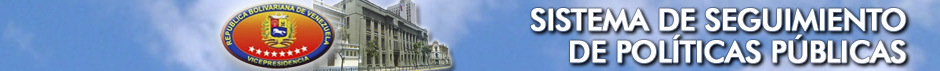
<style>
.page{position:relative;width:940px;height:71px}
.page>*{position:absolute;margin:0}
.t1{font:30px/22px "FuturaBT-Medium";letter-spacing:-0.03em;color:#ffffff;text-transform:uppercase;font-weight:bold}
</style>
<div class="page">
<p class="t1" style="left:530px;top:8px;width:376px;height:55px;text-align:right">Sistema de Seguimiento<br>De políticas públicas</p>
</div>
